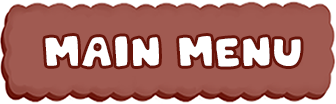
<style>
.page{position:relative;width:336px;height:104px;background:#a05a51}
.page>*{position:absolute;margin:0}
.t1{font:20px "PatchworkStitchlingsColor";letter-spacing:-0.025em;color:#ffffff}
</style>
<div class="page">
<p class="t1" style="left:45px;top:36px;width:256px;height:31px">Main menu</p>
</div>
